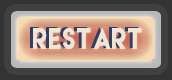
<style>
.page{position:relative;width:172px;height:80px;background:#404040}
.page>*{position:absolute;margin:0}
.t1{font:26.6px "LemonMilk";letter-spacing:0.05em;color:#f2e5d6;scale:0.9 1}
</style>
<div class="page">
<p class="t1" style="left:33px;top:28px;width:109px;height:21px">Restart</p>
<p class="t1" style="left:33px;top:28px;width:109px;height:21px">Restart</p>
</div>
